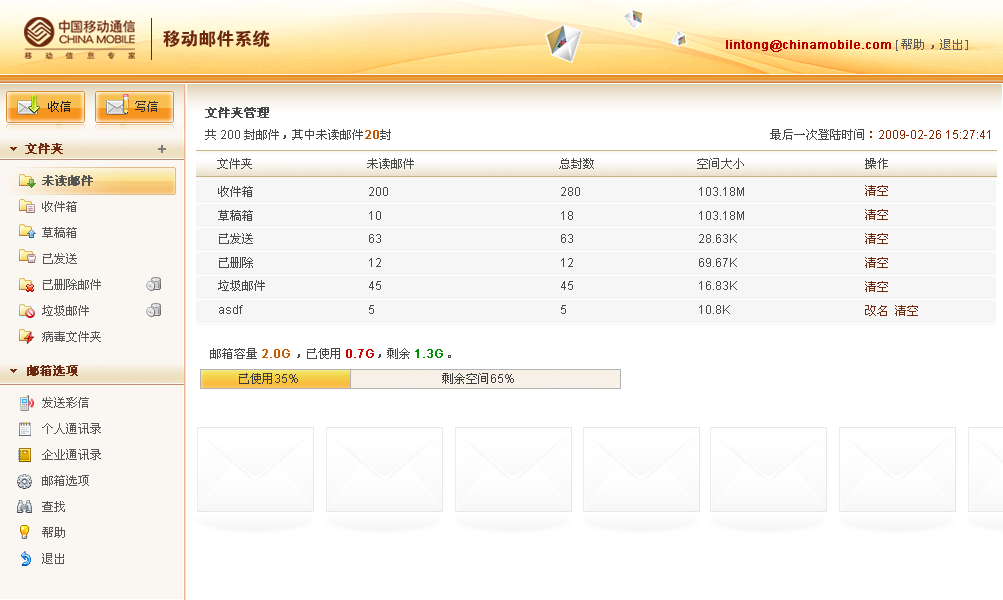
<style>
.page{position:relative;width:1003px;height:600px;background:#ffffff}
.page>*{position:absolute;margin:0}
.t1{font:18px "FZDHTJW--GB1-0";color:#6d290f}
.t2{font:12px "ArialMT";color:#b80000;font-weight:bold}
.t3{font:12px "ArialMT";color:#5e5e5e}
.t4{font:12px "SimSun";color:#5e5e5e}
.t5{font:12px "SimSun";color:#1e1e1e}
.t6{font:12px "SimSun";color:#313131}
.t7{font:12px/22px "SimSun";color:#474747}
.t8{font:12px/22px "SimSun";color:#474747;font-weight:bold}
.t9{font:12px/22px "ArialMT";color:#474747}
.t10{font:12px/22px "ArialMT";color:#c75900;font-weight:bold}
.t11{font:12px "ArialMT";color:#872500}
.t12{font:12px "SimSun";color:#474747}
.t13{font:12px "SimSun";color:#872500}
.t14{font:12px "SimSun";color:#6d290f;font-weight:bold}
.t15{font:12px/26px "SimSun";color:#555555}
.t16{font:12px/26px "SimSun";color:#555555;font-weight:bold}
.t17{font:12px/23.9px "SimSun";color:#6d290f}
.t18{font:12px/23.5px "SimSun";color:#474747}
.t19{font:12px/23.5px "ArialMT";color:#474747}
.t20{font:12px "ArialMT";color:#c75900;font-weight:bold}
.t21{font:12px "ArialMT";color:#cc0000;font-weight:bold}
.t22{font:12px "ArialMT";color:#008f00;font-weight:bold}
.t23{font:12px "SimSun";color:#3c3c3c}
.t24{font:12px "ArialMT";color:#3c3c3c}
</style>
<div class="page">
<p class="t1" style="left:163px;top:30px;width:107px;height:17px">移动邮件系统</p>
<p class="t2" style="left:726px;top:39px;width:242px;height:13px">lintong@chinamobile.com <span class="t3">[ </span><span class="t4">帮助 ，退出]</span></p>
<p class="t5" style="left:48px;top:101px;width:23px;height:11px">收信</p>
<p class="t6" style="left:135px;top:101px;width:23px;height:11px">写信</p>
<p class="t7" style="left:205px;top:107px;width:186px;height:33px"><span class="t8">文件夹管理<br></span>共<span class="t9"> 200 </span>封邮件，其中未读邮件<span class="t10">20</span>封</p>
<p class="t11" style="left:770px;top:129px;width:220px;height:11px"><span class="t12">最后一次登陆时间</span><span class="t13">：</span>2009-02-26 15:27:41</p>
<p class="t14" style="left:25px;top:143px;width:38px;height:11px">文件夹</p>
<p class="t12" style="left:217px;top:158px;width:671px;height:11px">文件夹              未读邮件                      总封数               空间大小                   操作</p>
<p class="t15" style="left:42px;top:175px;width:59px;height:167px"><span class="t16">未读邮件<br></span>收件箱<br>草稿箱<br>已发送<br>已删除邮件      <br>垃圾邮件       <br>病毒文件夹</p>
<p class="t17" style="left:865px;top:185px;width:53px;height:131px">清空<br>清空<br>清空<br>清空<br>清空<br>改名 清空</p>
<p class="t18" style="left:218px;top:186px;width:47px;height:128px">收件箱　   　　   　　<br>草稿箱<br>已发送　　   　　   　　<br>已删除　   　　   　　<br>垃圾邮件<span class="t19"><br>asdf</span></p>
<p class="t19" style="left:369px;top:187px;width:19px;height:127px">200<br>10<br>63<br>12<br>45<br>5</p>
<p class="t19" style="left:561px;top:187px;width:19px;height:127px">280<br>18<br>63<br>12<br>45<br>5</p>
<p class="t19" style="left:699px;top:187px;width:45px;height:127px">103.18M<br>103.18M<br>28.63K<br>69.67K<br>16.83K<br>10.8K</p>
<p class="t12" style="left:210px;top:348px;width:241px;height:11px">邮箱容量 <span class="t20">2.0G </span>，已使用 <span class="t21">0.7G</span>，剩余 <span class="t22">1.3G </span>。</p>
<p class="t14" style="left:27px;top:365px;width:51px;height:11px">邮箱选项</p>
<p class="t23" style="left:239px;top:373px;width:59px;height:11px">已使用<span class="t24">35%</span></p>
<p class="t23" style="left:442px;top:373px;width:72px;height:11px">剩余空间<span class="t24">65%</span></p>
<p class="t15" style="left:42px;top:397px;width:59px;height:167px">发送彩信<br>个人通讯录<br>企业通讯录<br>邮箱选项<br>查找<br>帮助<br>退出</p>
</div>
